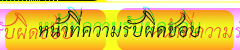
<style>
.page{position:relative;width:240px;height:50px}
.page>*{position:absolute;margin:0}
.t1{font:28px "THCharmonman"}
</style>
<div class="page">
<p class="t1" style="left:39px;top:6px;width:162px;height:27px">หน้าที่ความรับผิดชอบ</p>
</div>
